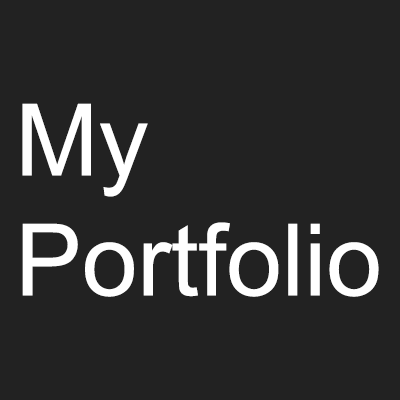
<style>
.page{position:relative;width:400px;height:400px;background:#222222}
.page>*{position:absolute;margin:0}
.t1{font:100px "ArialMT";color:#ffffff}
</style>
<div class="page">
<p class="t1" style="left:22px;top:103px;width:357px;height:194px">My<br>Portfolio</p>
</div>
